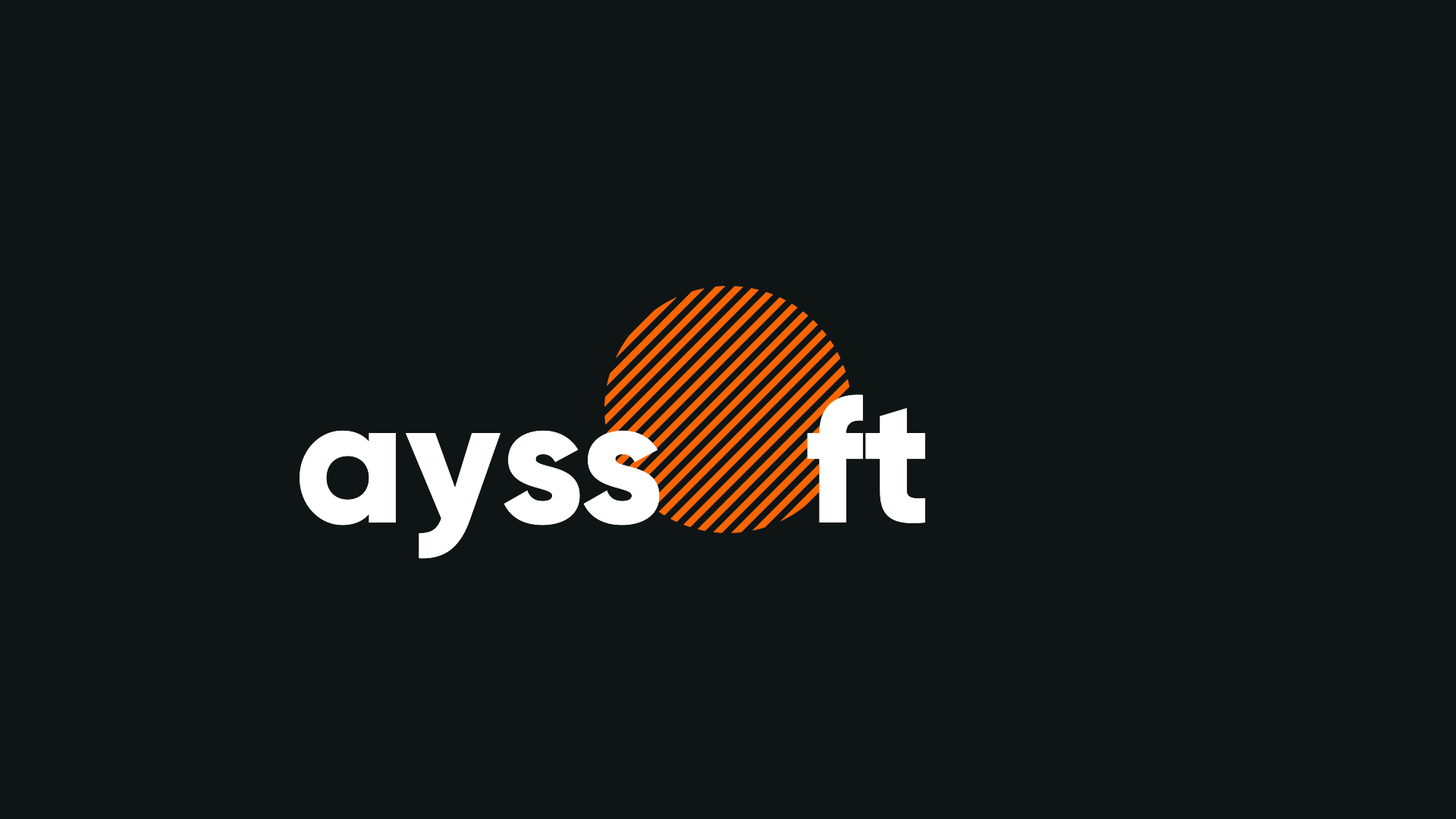
<style>
.page{position:relative;width:1456px;height:819px;background:#0f1415}
.page>*{position:absolute;margin:0}
.t1{font:178.7px "Gilroy-ExtraBold";color:#ffffff}
</style>
<div class="page">
<p class="t1" style="left:807px;top:394px;width:119px;height:129px">ft</p>
<p class="t1" style="left:300px;top:430px;width:280px;height:129px">ays</p>
<p class="t1" style="left:583px;top:430px;width:77px;height:96px">s</p>
</div>
